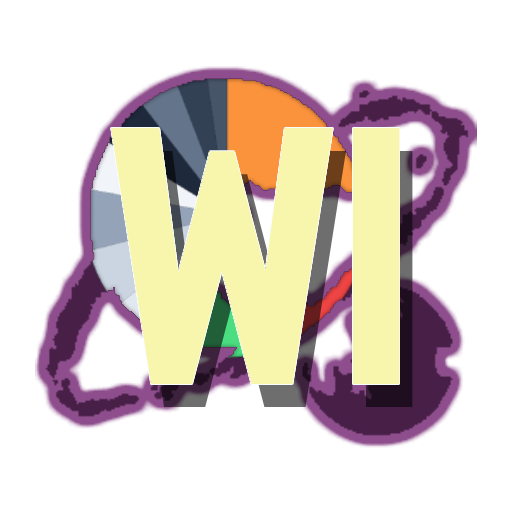
<style>
.page{position:relative;width:512px;height:512px;background:#ffffff}
.page>*{position:absolute;margin:0}
.t1{font:400px "Bombardier";color:#f8f6ad}
</style>
<div class="page">
<p class="t1" style="left:111px;top:128px;width:289px;height:256px">WI</p>
</div>
